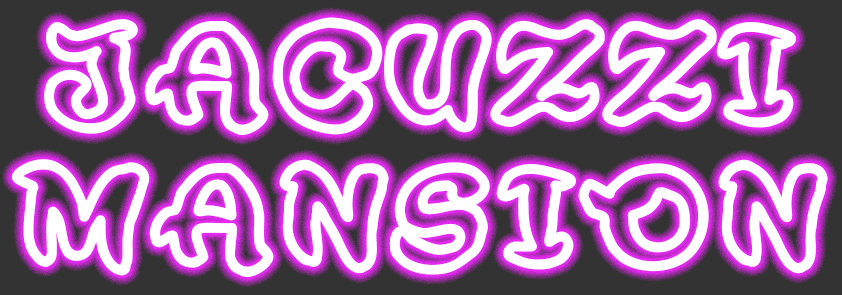
<style>
.page{position:relative;width:842px;height:295px;background:#333333}
.page>*{position:absolute;margin:0}
.t1{font:118px "RoughRakoonOutPERSONALUSE";letter-spacing:0.09em;color:#ffffff;font-weight:bold}
</style>
<div class="page">
<p class="t1" style="left:11px;top:17px;width:817px;height:260px;text-align:center">JACUZZI<br>MANSION</p>
</div>
